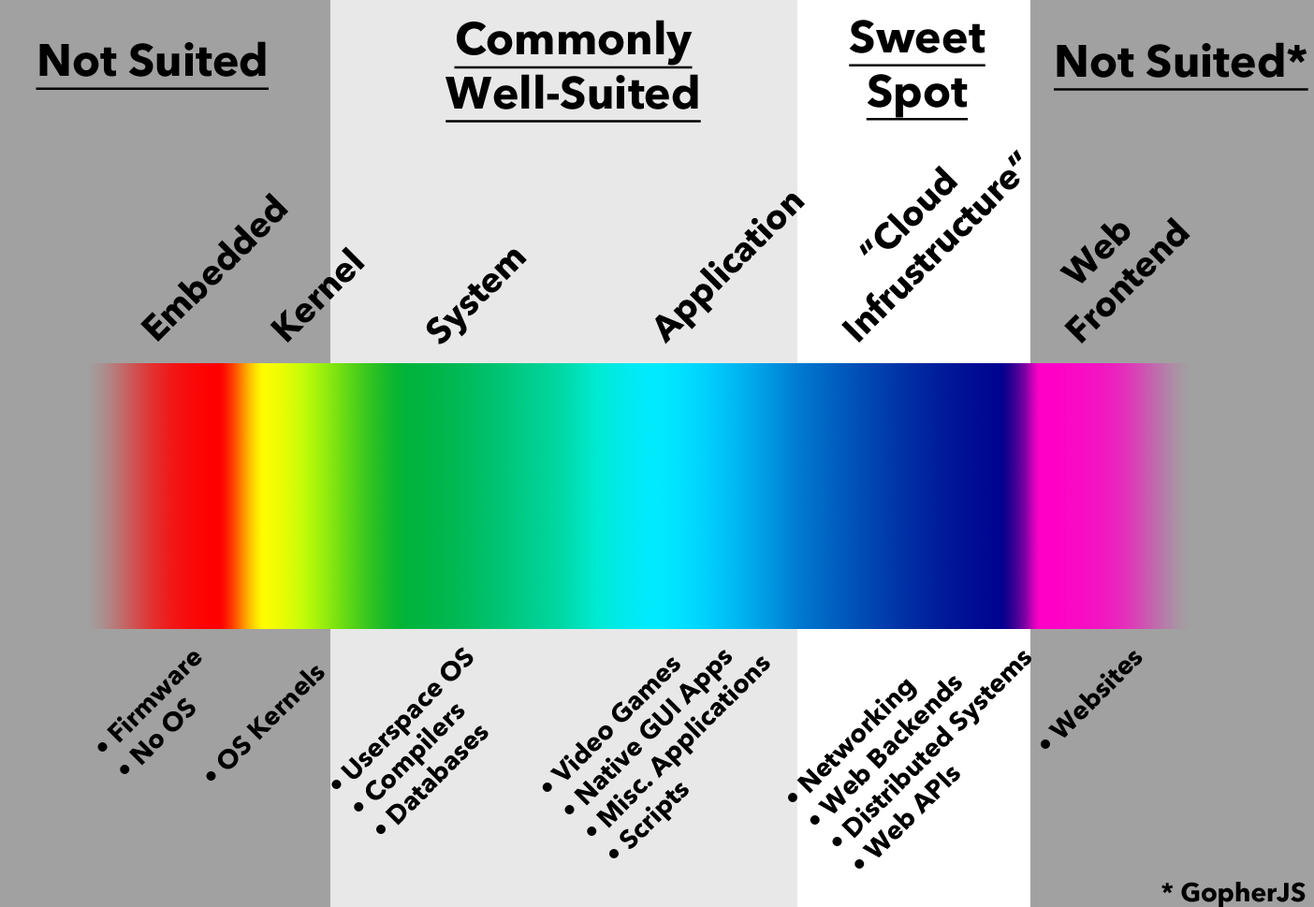
<style>
.page{position:relative;width:1314px;height:907px;background:#a1a1a1}
.page>*{position:absolute;margin:0}
.t1{font:44.9px "AvenirNext-Bold";color:#000000;text-decoration:underline}
.t2{font:35.3px "AvenirNext-Bold";color:#000000}
.t3{font:26.2px "AvenirNext-Bold";color:#000000}
</style>
<div class="page">
<p class="t1" style="left:446px;top:20px;width:255px;height:103px;text-align:center">Commonly<br>Well-Suited</p>
<p class="t1" style="left:849px;top:20px;width:137px;height:101px;text-align:center">Sweet<br>Spot</p>
<p class="t1" style="left:36px;top:41px;width:233px;height:49px">Not Suited</p>
<p class="t1" style="left:1054px;top:42px;width:255px;height:49px">Not Suited*</p>
<p class="t2" style="left:842px;top:149px;width:180px;height:194px;text-align:center;rotate:-45deg">“Cloud<br>Infrustructure”</p>
<p class="t2" style="left:140px;top:192px;width:148px;height:150px;rotate:-45deg">Embedded</p>
<p class="t2" style="left:655px;top:194px;width:150px;height:151px;rotate:-45deg">Application</p>
<p class="t2" style="left:1060px;top:216px;width:131px;height:128px;text-align:center;rotate:-45deg">Web<br>Frontend</p>
<p class="t2" style="left:270px;top:246px;width:95px;height:97px;rotate:-45deg">Kernel</p>
<p class="t2" style="left:426px;top:249px;width:101px;height:96px;rotate:-45deg">System</p>
<p class="t3" style="left:97px;top:652px;width:105px;height:122px;rotate:-45deg">• Firmware<br>• No OS</p>
<p class="t3" style="left:331px;top:647px;width:158px;height:187px;rotate:-45deg">• Userspace OS<br>• Compilers<br>• Databases</p>
<p class="t3" style="left:542px;top:650px;width:228px;height:209px;rotate:-45deg">• Video Games<br>• Native GUI Apps<br>• Misc. Applications<br>• Scripts</p>
<p class="t3" style="left:788px;top:651px;width:244px;height:218px;rotate:-45deg">• Networking<br>• Web Backends<br>• Distributed Systems<br>• Web APIs</p>
<p class="t3" style="left:1041px;top:651px;width:102px;height:98px;rotate:-45deg">• Websites</p>
<p class="t3" style="left:206px;top:666px;width:119px;height:115px;rotate:-45deg">• OS Kernels</p>
<p class="t3" style="left:1162px;top:882px;width:144px;height:26px">* GopherJS</p>
</div>
